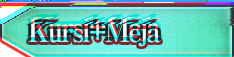
<style>
.page{position:relative;width:234px;height:57px}
.page>*{position:absolute;margin:0}
.t1{font:27px "RyuminPro-ExBold";letter-spacing:-0.08em}
</style>
<div class="page">
<p class="t1" style="left:28px;top:16px;width:133px;height:26px">Kursi+Meja</p>
</div>
